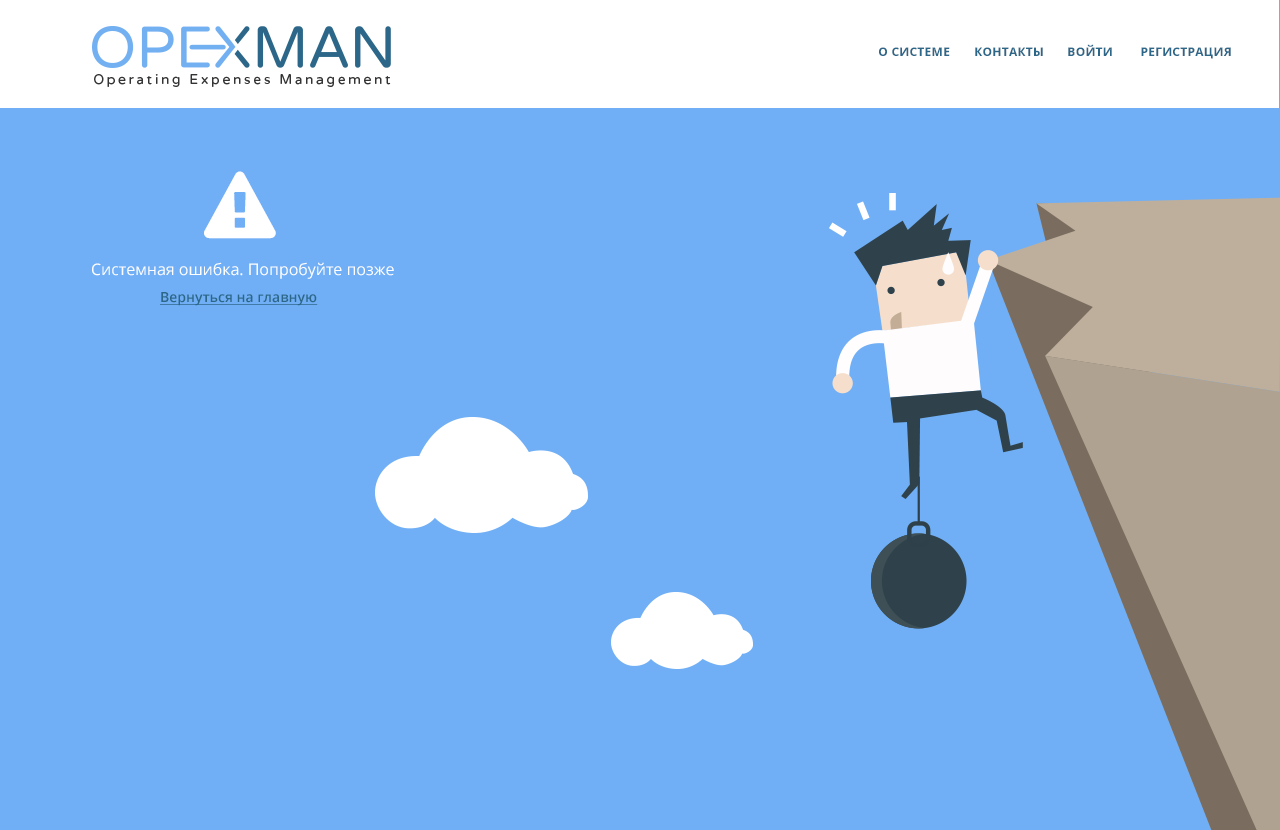
<style>
.page{position:relative;width:1280px;height:830px;background:#70aff5}
.page>*{position:absolute;margin:0}
.t1{font:12px "OpenSans-Bold";letter-spacing:0.025em;color:#2c6789;text-transform:uppercase}
.t2{font:15.9px "OpenSans";color:#ffffff}
.t3{font:13.9px "OpenSans-Semibold";color:#2c6789;text-decoration:underline}
</style>
<div class="page">
<p class="t1" style="left:879px;top:47px;width:71px;height:9px">О системе</p>
<p class="t1" style="left:975px;top:47px;width:68px;height:9px">Контакты</p>
<p class="t1" style="left:1068px;top:44px;width:44px;height:12px">Войти</p>
<p class="t1" style="left:1141px;top:47px;width:90px;height:12px">РЕГИСТРация</p>
<p class="t2" style="left:92px;top:262px;width:302px;height:17px">Системная ошибка. Попробуйте позже</p>
<p class="t3" style="left:160px;top:292px;width:158px;height:14px">Вернуться на главную</p>
</div>
